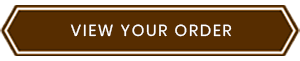
<style>
.page{position:relative;width:300px;height:61px;background:#572d00}
.page>*{position:absolute;margin:0}
.t1{font:16px "Poppins-Regular";letter-spacing:0.1em;color:#ffffff;text-transform:uppercase}
</style>
<div class="page">
<p class="t1" style="left:70px;top:24px;width:162px;height:13px">View Your Order</p>
</div>
